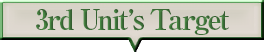
<style>
.page{position:relative;width:264px;height:52px;background:#ffffff}
.page>*{position:absolute;margin:0}
.t1{font:28px "RyuminPro-ExBold";letter-spacing:-0.08em;color:#3d6f39}
</style>
<div class="page">
<p class="t1" style="left:36px;top:9px;width:193px;height:26px">3rd Unit’s Target</p>
</div>
